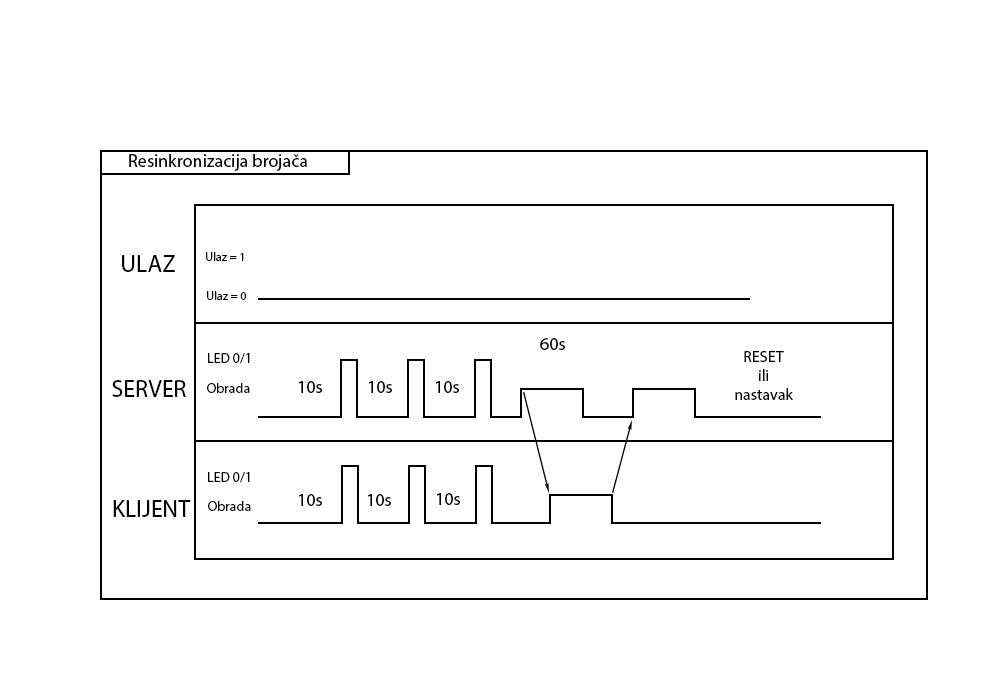
<style>
.page{position:relative;width:1000px;height:700px;background:#ffffff}
.page>*{position:absolute;margin:0}
.t1{font:18px "MyriadPro-Regular";color:#000000}
.t2{font:24px "MyriadPro-Regular";color:#000000}
.t3{font:12px "MyriadPro-Regular";color:#000000}
.t4{font:14px "MyriadPro-Regular";color:#000000}
.t5{font:16px "MyriadPro-Regular";color:#000000}
</style>
<div class="page">
<p class="t1" style="left:129px;top:154px;width:178px;height:17px">Resinkronizacija brojača</p>
<p class="t2" style="left:122px;top:255px;width:53px;height:17px">ULAZ</p>
<p class="t3" style="left:206px;top:252px;width:38px;height:9px">Ulaz = 1</p>
<p class="t3" style="left:207px;top:291px;width:39px;height:9px">Ulaz = 0</p>
<p class="t1" style="left:540px;top:338px;width:25px;height:12px">60s</p>
<p class="t4" style="left:208px;top:353px;width:42px;height:11px">LED 0/1</p>
<p class="t5" style="left:735px;top:351px;width:58px;height:49px;text-align:center">RESET<br>ili<br>nastavak</p>
<p class="t2" style="left:112px;top:380px;width:74px;height:17px">SERVER</p>
<p class="t4" style="left:207px;top:383px;width:43px;height:10px">Obrada</p>
<p class="t1" style="left:299px;top:381px;width:23px;height:12px">10s</p>
<p class="t1" style="left:369px;top:381px;width:23px;height:12px">10s</p>
<p class="t1" style="left:436px;top:381px;width:23px;height:12px">10s</p>
<p class="t4" style="left:208px;top:472px;width:42px;height:11px">LED 0/1</p>
<p class="t1" style="left:299px;top:494px;width:23px;height:12px">10s</p>
<p class="t1" style="left:368px;top:494px;width:23px;height:12px">10s</p>
<p class="t1" style="left:437px;top:493px;width:23px;height:12px">10s</p>
<p class="t2" style="left:113px;top:500px;width:78px;height:17px">KLIJENT</p>
<p class="t4" style="left:208px;top:501px;width:43px;height:10px">Obrada</p>
</div>
